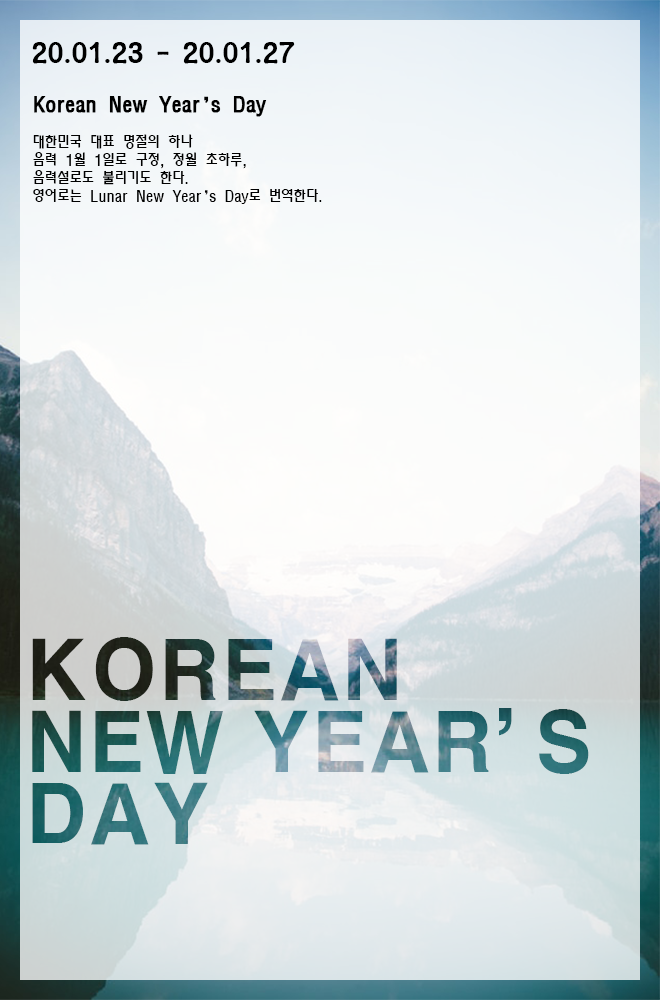
<style>
.page{position:relative;width:660px;height:1000px}
.page>*{position:absolute;margin:0}
.t1{font:30px "YetR-HM";color:#000000}
.t2{font:15px "MoeumTR-HM";color:#000000}
.t3{font:20px/72px "MoeumTR-HM";color:#000000;font-weight:bold}
.t4{font:20px/72px "MoeumTR-HM";letter-spacing:-0.5em;color:#000000;font-weight:bold}
.t5{font:15px "MoeumTR-HM";letter-spacing:-0.5em;color:#000000}
.t6{font:80px/72px "H2gtrE"}
.t7{font:80px/72px "H2gtrE";letter-spacing:-0.5em}
</style>
<div class="page">
<p class="t1" style="left:32px;top:42px;width:263px;height:22px">20.01.23 - 20.01.27</p>
<p class="t2" style="left:33px;top:96px;width:289px;height:108px"><span class="t3">Korean New Year</span><span class="t4">’</span><span class="t3">s Day<br></span><br>대한민국 대표 명절의 하나<br>음력 1월 1일로 구정, 정월 초하루,<br>음력설로도 불리기도 한다.<br>영어로는 Lunar New Year<span class="t5">’</span>s Day로 번역한다.</p>
<p class="t6" style="left:32px;top:637px;width:557px;height:208px">KOREAN<br>NEW YEAR<span class="t7">’</span>S<br>DAY</p>
</div>
